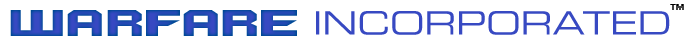
<style>
.page{position:relative;width:690px;height:46px;background:#ffffff}
.page>*{position:absolute;margin:0}
.t1{font:8px "Small Fonts";color:#000000}
.t2{font:40px "Quadrangle";color:#2349b3}
.t3{font:32px "Eurostile-ExtendedTwo";color:#3749c2}
</style>
<div class="page">
<p class="t1" style="left:670px;top:4px;width:14px;height:6px">TM</p>
<p class="t2" style="left:10px;top:10px;width:287px;height:26px">WARFARE</p>
<p class="t3" style="left:316px;top:11px;width:354px;height:24px">INCORPORATED</p>
</div>
